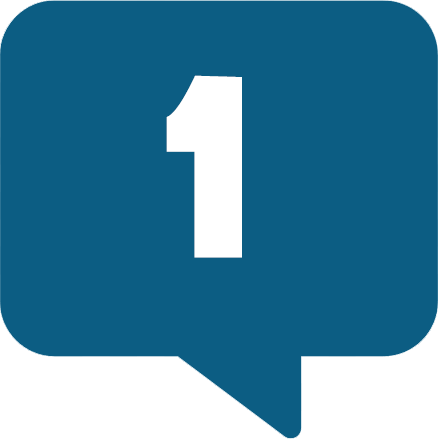
<style>
.page{position:relative;width:438px;height:439px;background:#0c5d83}
.page>*{position:absolute;margin:0}
.t1{font:226.7px "CartoonistKooky";color:#ffffff}
</style>
<div class="page">
<p class="t1" style="left:166px;top:75px;width:76px;height:183px">1</p>
</div>
